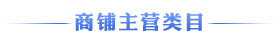
<style>
.page{position:relative;width:280px;height:40px;background:#ffffff}
.page>*{position:absolute;margin:0}
.t1{font:20px "DFPLiJinHeiW8";letter-spacing:0.1em;color:#5381ed}
</style>
<div class="page">
<p class="t1" style="left:75px;top:12px;width:128px;height:20px">商铺主营类目</p>
</div>
